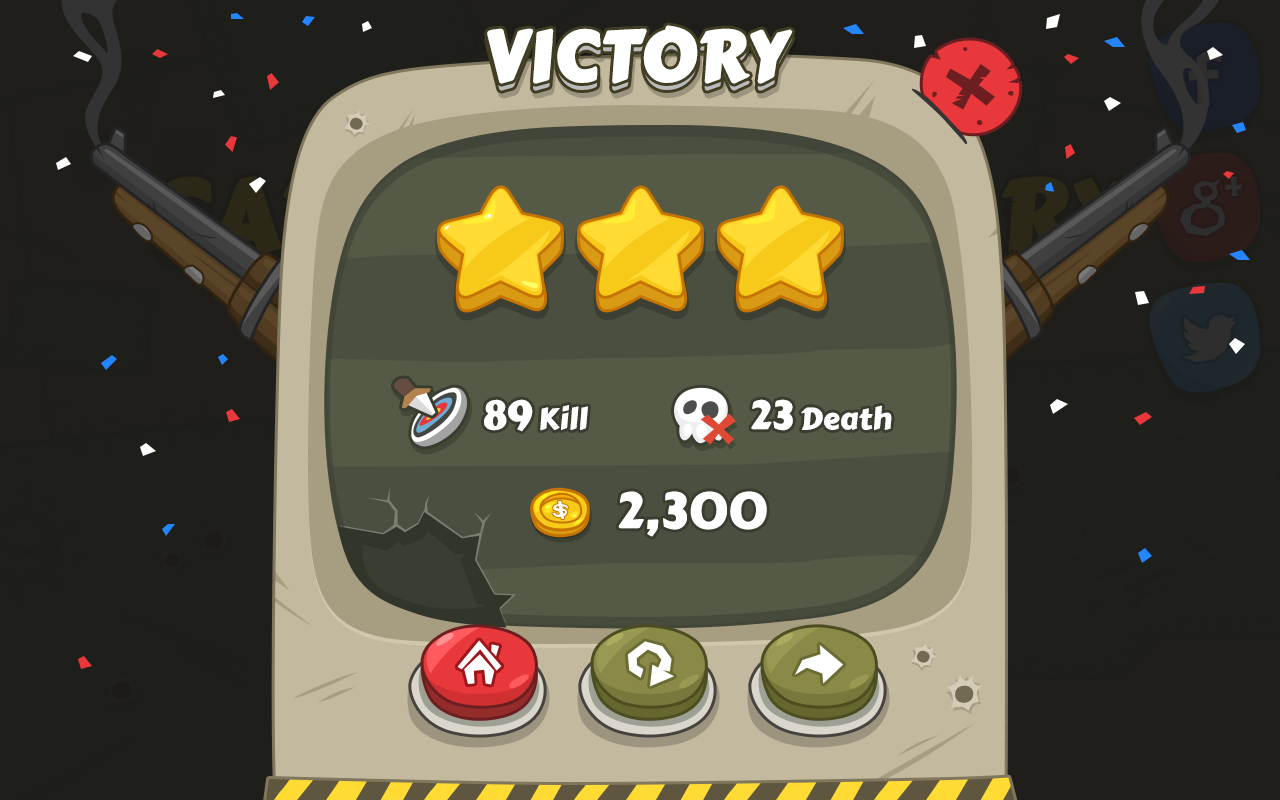
<style>
.page{position:relative;width:1280px;height:800px}
.page>*{position:absolute;margin:0}
.t1{font:70px "CarterOne";color:#ffffff;text-transform:uppercase;font-weight:bold}
.t2{font:30px "CarterOne";color:#ffffff}
.t3{font:40px "CarterOne";color:#ffffff;text-transform:uppercase}
.t4{font:30px "CarterOne";color:#ffffff;text-transform:uppercase}
.t5{font:40px "CarterOne";color:#ffffff}
.t6{font:50px "CarterOne";color:#ffffff;text-transform:uppercase}
</style>
<div class="page">
<p class="t1" style="left:487px;top:25px;width:306px;height:59px">VICTORY</p>
<p class="t1" style="left:487px;top:32px;width:306px;height:59px">VICTORY</p>
<p class="t2" style="left:484px;top:399px;width:104px;height:33px"><span class="t3">89</span><span class="t4"> K</span>ill</p>
<p class="t2" style="left:751px;top:399px;width:141px;height:32px"><span class="t5">23</span> Death</p>
<p class="t6" style="left:618px;top:491px;width:149px;height:46px">2,300</p>
</div>
